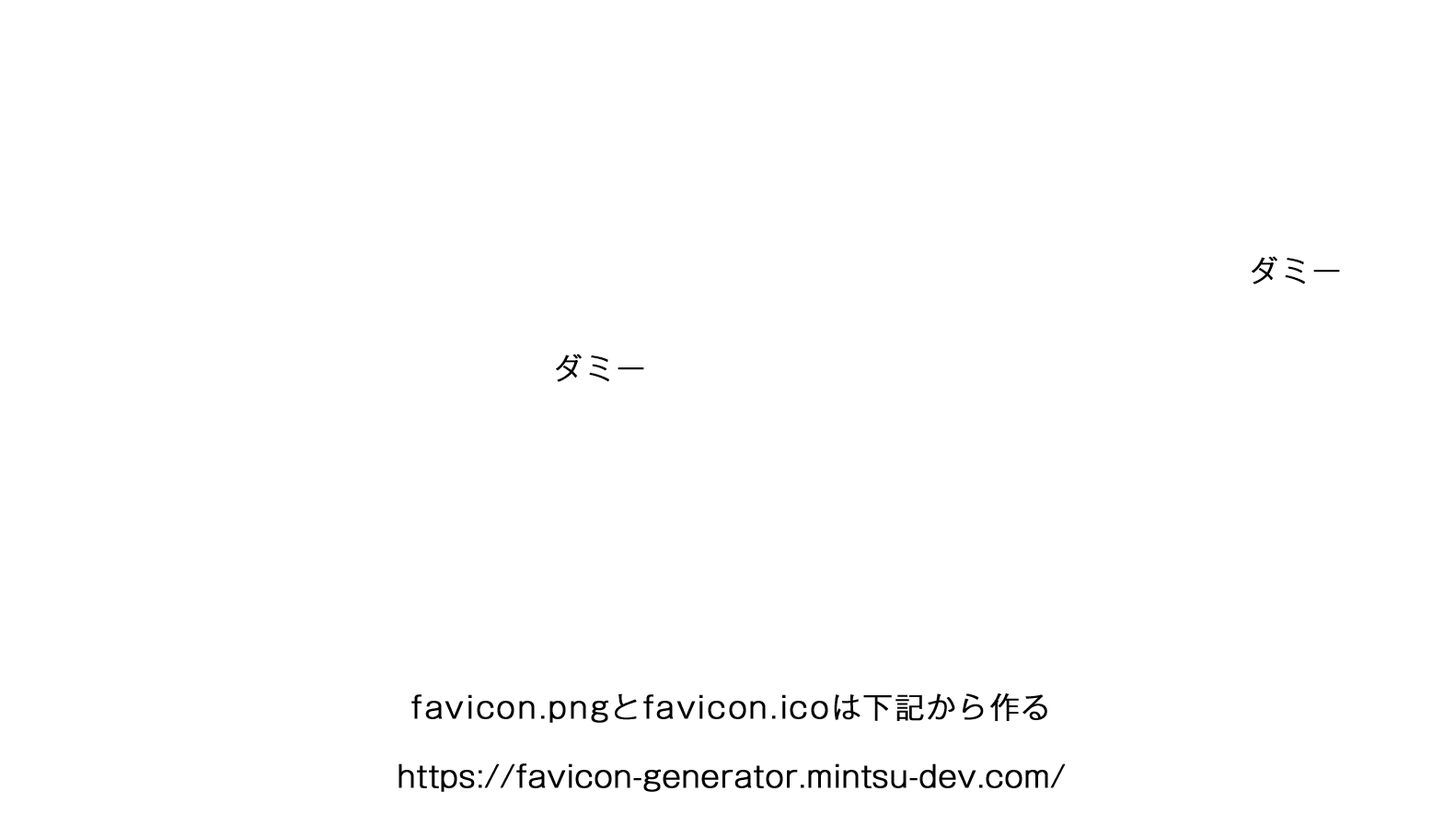
<style>
.page{position:relative;width:1444px;height:826px;background:#ffffff}
.page>*{position:absolute;margin:0}
.t1{font:29.5px "GothicMB101-Lig";letter-spacing:0.05em;color:#000000;font-weight:bold}
.t2{font:29.5px "GothicMB101-Lig";color:#000000;font-weight:bold}
</style>
<div class="page">
<p class="t1" style="left:1252px;top:256px;width:88px;height:28px">ダミー</p>
<p class="t1" style="left:556px;top:353px;width:88px;height:29px">ダミー</p>
<p class="t1" style="left:411px;top:693px;width:636px;height:30px">favicon.pngとfavicon.icoは下記から作る</p>
<p class="t2" style="left:399px;top:763px;width:667px;height:29px">https://favicon-generator.mintsu-dev.com/</p>
</div>
